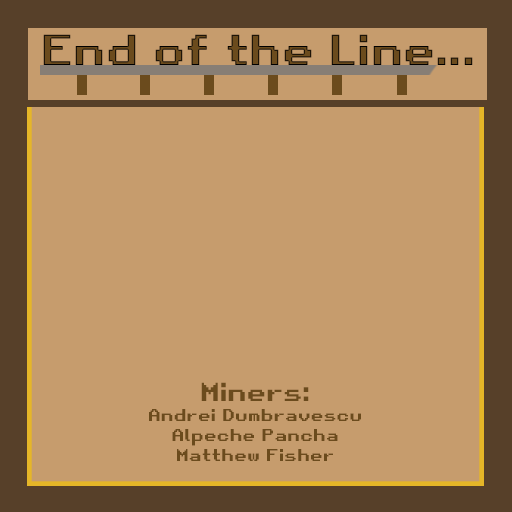
<style>
.page{position:relative;width:512px;height:512px;background:#c69c6d}
.page>*{position:absolute;margin:0}
.t1{font:41.7px "RetroGaming"}
.t2{font:16.7px "RetroGaming";color:#6b4b1d}
.t3{font:25px "RetroGaming";color:#6b4b1d}
</style>
<div class="page">
<p class="t1" style="left:43px;top:34px;width:430px;height:31px">End of the Line...</p>
<p class="t2" style="left:149px;top:382px;width:212px;height:79px;text-align:center"><span class="t3">Miners:<br></span>Andrei Dumbravescu<br>Alpeche Pancha<br>Matthew Fisher</p>
</div>
